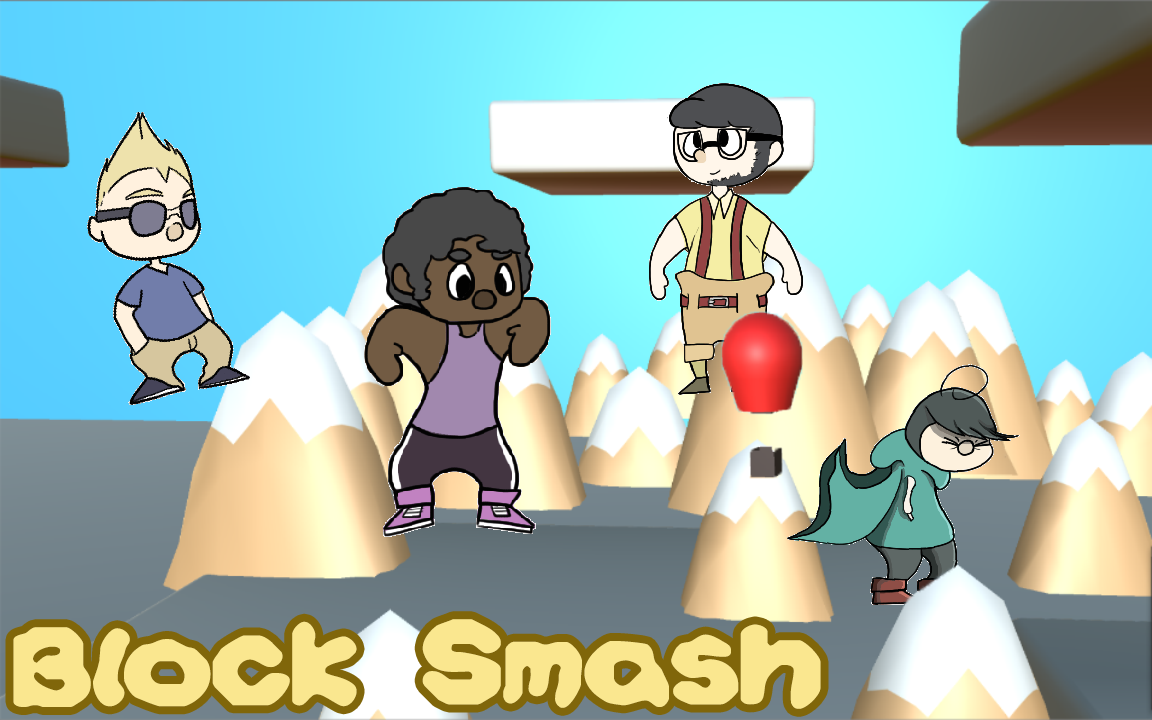
<style>
.page{position:relative;width:1152px;height:720px}
.page>*{position:absolute;margin:0}
.t1{font:128px "Yoshi'sStorygametextBRK";color:#fae78f}
</style>
<div class="page">
<p class="t1" style="left:13px;top:619px;width:808px;height:90px">Block Smash</p>
</div>
